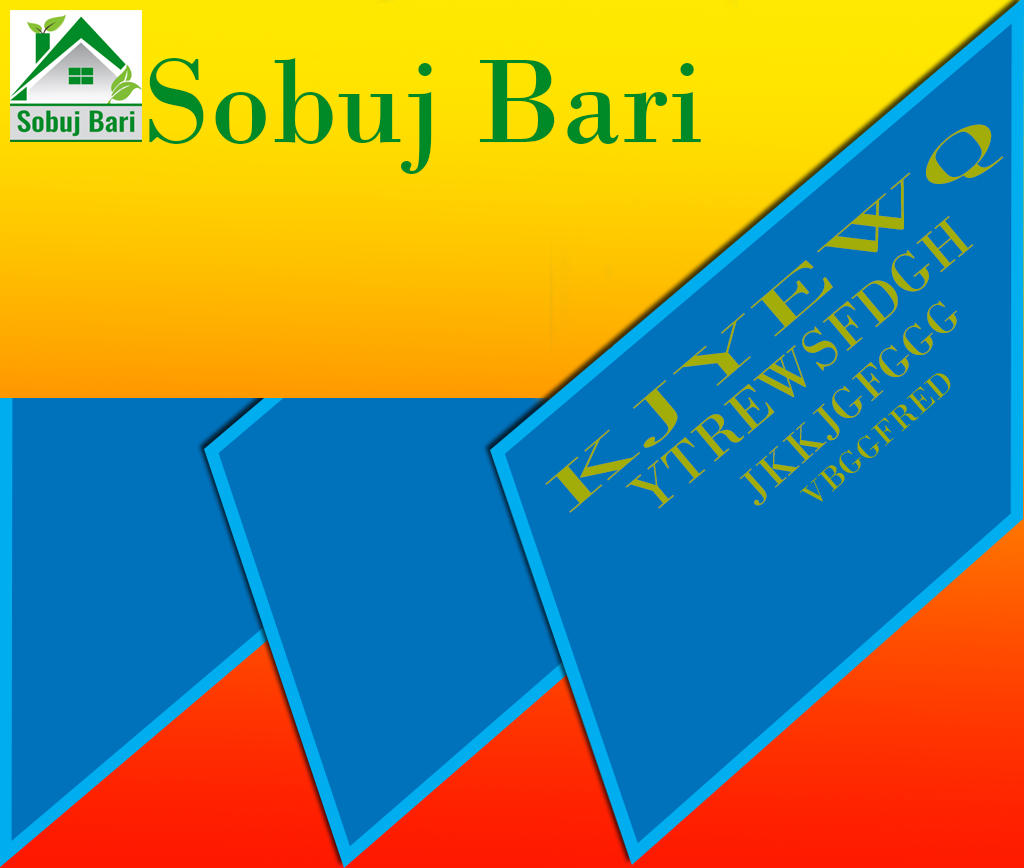
<style>
.page{position:relative;width:1024px;height:868px;background:#0072bc}
.page>*{position:absolute;margin:0}
.t1{font:125px "BodoniMT";color:#008a27}
.t2{font:58.3px "BodoniMT";color:#a3ad0a}
.t3{font:45.8px "BodoniMT";color:#a3ad0a}
</style>
<div class="page">
<p class="t1" style="left:149px;top:58px;width:552px;height:116px">Sobuj Bari</p>
<p class="t2" style="left:625px;top:216px;width:349px;height:293px;rotate:-40deg">YTREWSFDGH</p>
<p class="t3" style="left:739px;top:300px;width:218px;height:206px;rotate:-42deg">JKKJGFGGG</p>
</div>
